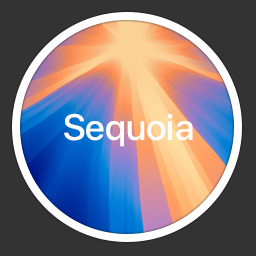
<style>
.page{position:relative;width:256px;height:256px;background:#333333}
.page>*{position:absolute;margin:0}
.t1{font:36.6px "SFProDisplay-Medium";color:#ffffff}
</style>
<div class="page">
<p class="t1" style="left:64px;top:113px;width:129px;height:34px">Sequoia</p>
</div>
